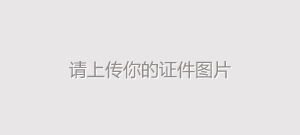
<style>
.page{position:relative;width:300px;height:135px;background:#e8e6e7}
.page>*{position:absolute;margin:0}
.t1{font:18px "MicrosoftYaHei";color:#918a8a}
</style>
<div class="page">
<p class="t1" style="left:69px;top:61px;width:162px;height:18px">请上传你的证件图片</p>
</div>
